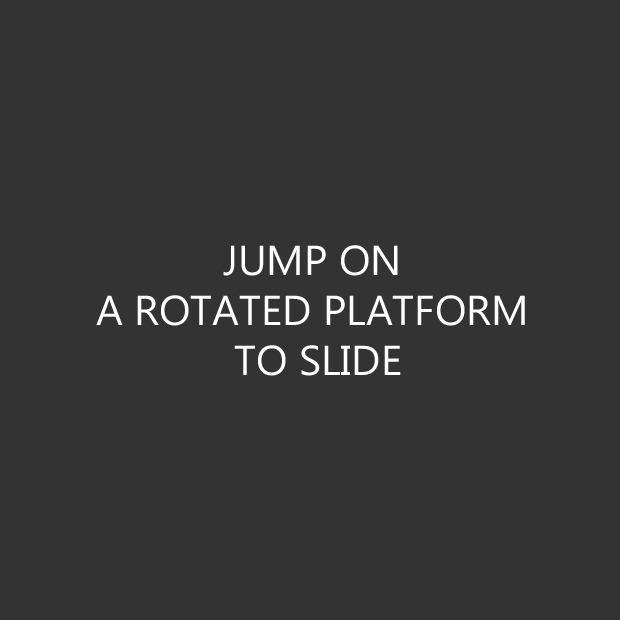
<style>
.page{position:relative;width:620px;height:620px;background:#333333}
.page>*{position:absolute;margin:0}
.t1{font:41.7px "MicrosoftPhagsPa";color:#ffffff}
</style>
<div class="page">
<p class="t1" style="left:96px;top:245px;width:429px;height:131px;text-align:center">JUMP ON <br>A ROTATED PLATFORM <br>TO SLIDE</p>
</div>
